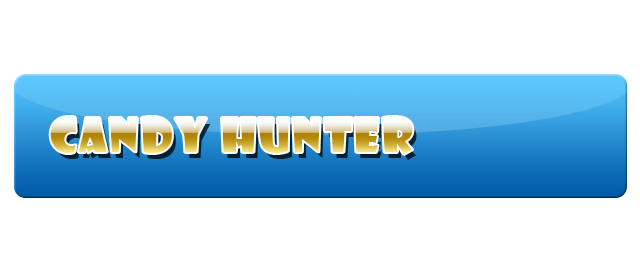
<style>
.page{position:relative;width:640px;height:256px;background:#ffffff}
.page>*{position:absolute;margin:0}
.t1{font:45.5px "ShowcardGothic-Reg";letter-spacing:0.05em}
</style>
<div class="page">
<p class="t1" style="left:50px;top:117px;width:363px;height:37px">Candy Hunter</p>
</div>
